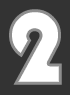
<style>
.page{position:relative;width:70px;height:95px;background:#333333}
.page>*{position:absolute;margin:0}
.t1{font:110px "Bauhaus93";letter-spacing:0.2em;color:#ffffff}
</style>
<div class="page">
<p class="t1" style="left:9px;top:9px;width:53px;height:76px">2</p>
</div>
